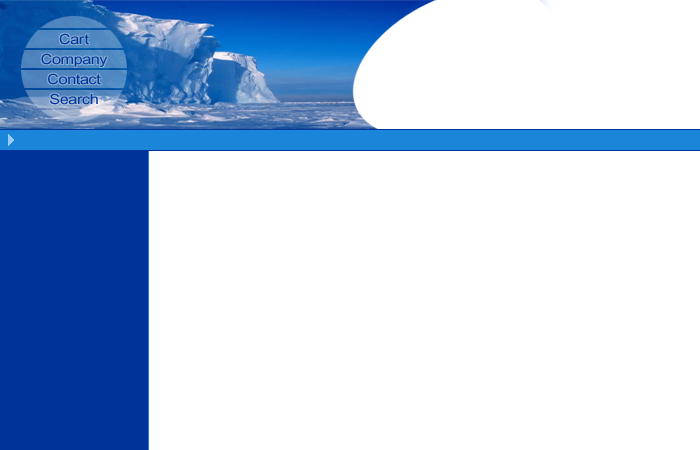
<style>
.page{position:relative;width:700px;height:450px;background:#ffffff}
.page>*{position:absolute;margin:0}
.t1{font:14px/20px "ArialMT";letter-spacing:-0.025em;color:#003399;scale:1.15 1}
</style>
<div class="page">
<p class="t1" style="left:41px;top:33px;width:67px;height:72px;text-align:center">Cart<br>Company<br>Contact<br>Search</p>
</div>
